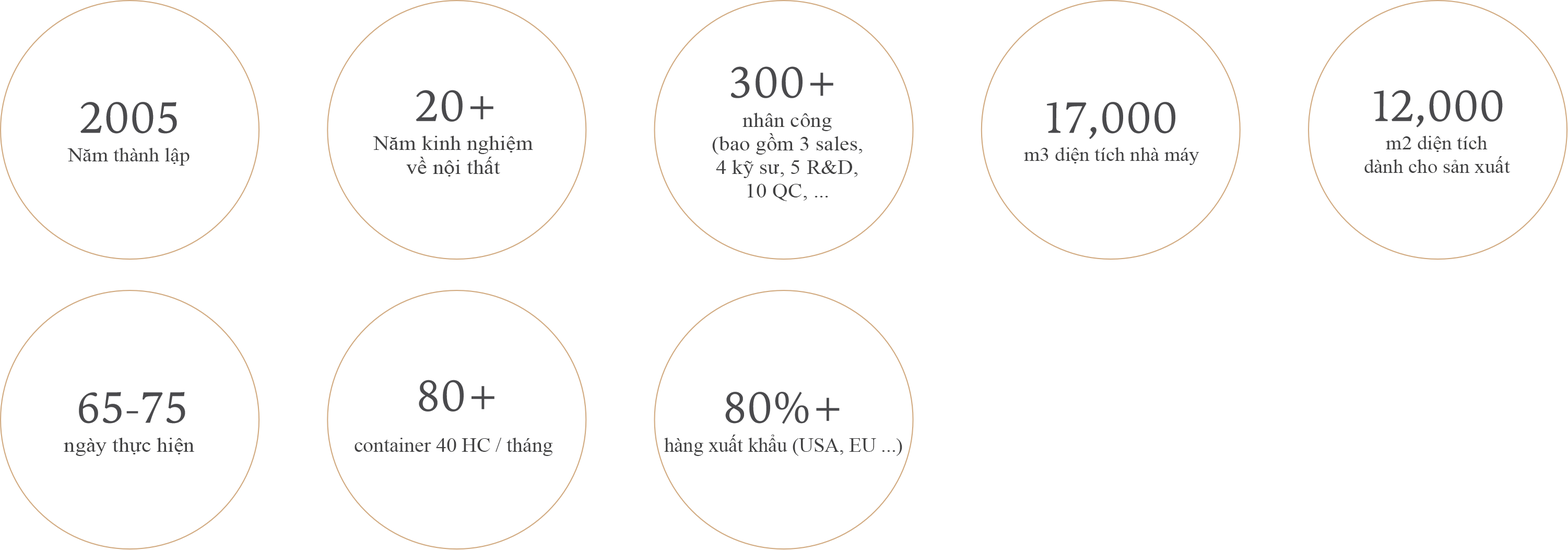
<style>
.page{position:relative;width:1568px;height:550px;background:#ffffff}
.page>*{position:absolute;margin:0}
.t1{font:19.6px "TimesNewRomanPSMT";color:#404041;scale:1.1 1}
.t2{font:20.1px "TimesNewRomanPSMT";color:#404041;scale:1.1 1}
.t3{font:19.6px "TimesNewRomanPSMT";color:#404041;scale:1.04 1}
.t4{font:19.4px "TimesNewRomanPSMT";color:#404041;scale:1.07 1}
.t5{font:19.6px "TimesNewRomanPSMT";color:#404041;scale:1.03 1}
.t6{font:19.7px "TimesNewRomanPSMT";color:#404041;scale:1.12 1}
.t7{font:19.7px "TimesNewRomanPSMT";color:#404041;scale:1.05 1}
.t8{font:19.6px "TimesNewRomanPSMT";color:#404041}
</style>
<div class="page">
<p class="t1" style="left:712px;top:113px;width:151px;height:88px;text-align:center">nhân công<br>(bao gồm 3 sales,<br>4 kỹ sư, 5 R&amp;D,<br>10 QC, ...</p>
<p class="t2" style="left:373px;top:136px;width:160px;height:40px;text-align:center">Năm kinh nghiệm<br>về nội thất</p>
<p class="t3" style="left:1364px;top:136px;width:146px;height:37px;text-align:center">m2 diện tích<br>dành cho sản xuất</p>
<p class="t4" style="left:67px;top:148px;width:123px;height:18px">Năm thành lập</p>
<p class="t5" style="left:1024px;top:147px;width:175px;height:18px">m3 diện tích nhà máy</p>
<p class="t6" style="left:64px;top:438px;width:130px;height:18px">ngày thực hiện</p>
<p class="t7" style="left:355px;top:438px;width:198px;height:18px">container 40 HC / tháng</p>
<p class="t8" style="left:664px;top:434px;width:238px;height:22px">hàng xuất khẩu (USA, EU ...)</p>
</div>
